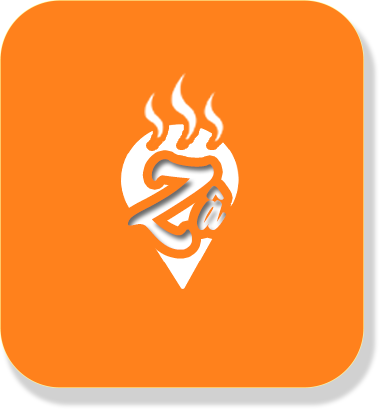
<style>
.page{position:relative;width:379px;height:409px;background:#ff811c}
.page>*{position:absolute;margin:0}
.t1{font:79px "Fabiana-Regular";letter-spacing:0.005em;font-weight:bold}
.t2{font:55.8px "RalliankaraPersonalUseOnly";letter-spacing:0.005em;font-weight:bold}
</style>
<div class="page">
<p class="t1" style="left:128px;top:159px;width:98px;height:91px">Z<span class="t2">â</span></p>
</div>
